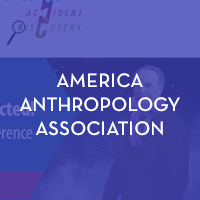
<style>
.page{position:relative;width:200px;height:200px;background:#6365c4}
.page>*{position:absolute;margin:0}
.t1{font:20px "NeutraText-DemiAlt";color:#ffffff}
</style>
<div class="page">
<p class="t1" style="left:19px;top:73px;width:161px;height:63px;text-align:center">AMERICA<br>ANTHROPOLOGY<br>ASSOCIATION</p>
</div>
